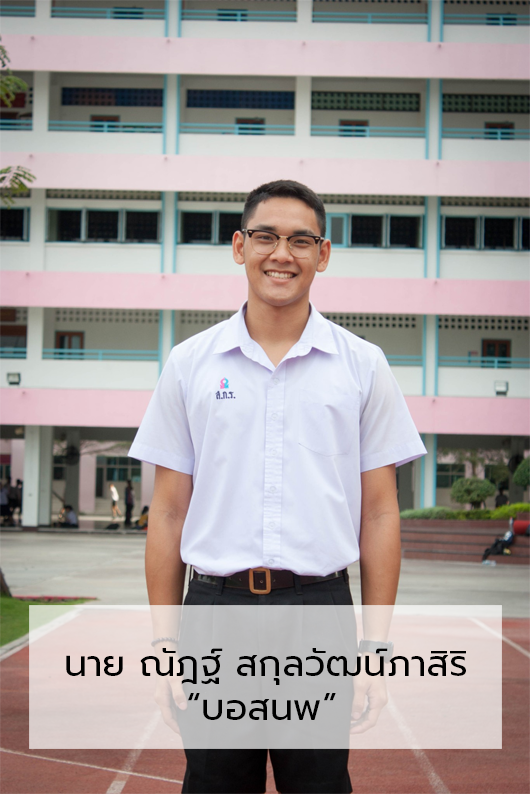
<style>
.page{position:relative;width:530px;height:794px}
.page>*{position:absolute;margin:0}
.t1{font:36.7px "Prompt-Regular";color:#000000}
</style>
<div class="page">
<p class="t1" style="left:66px;top:648px;width:400px;height:72px">นาย ณัฎฐ์ สกุลวัฒน์ภาสิริ<br>         “บอสนพ”</p>
</div>
